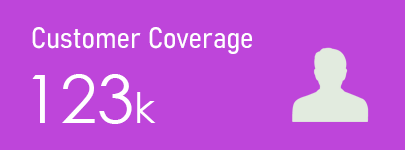
<style>
.page{position:relative;width:405px;height:150px;background:#be45da}
.page>*{position:absolute;margin:0}
.t1{font:29.2px "Bahnschrift-SemiLightSemiCondensed";color:#ffffff}
.t2{font:66.7px "CenturyGothic";color:#ffffff}
.t3{font:41.7px "CenturyGothic";color:#ffffff}
</style>
<div class="page">
<p class="t1" style="left:32px;top:27px;width:220px;height:27px">Customer Coverage</p>
<p class="t2" style="left:32px;top:74px;width:124px;height:50px">123<span class="t3">k</span></p>
</div>
